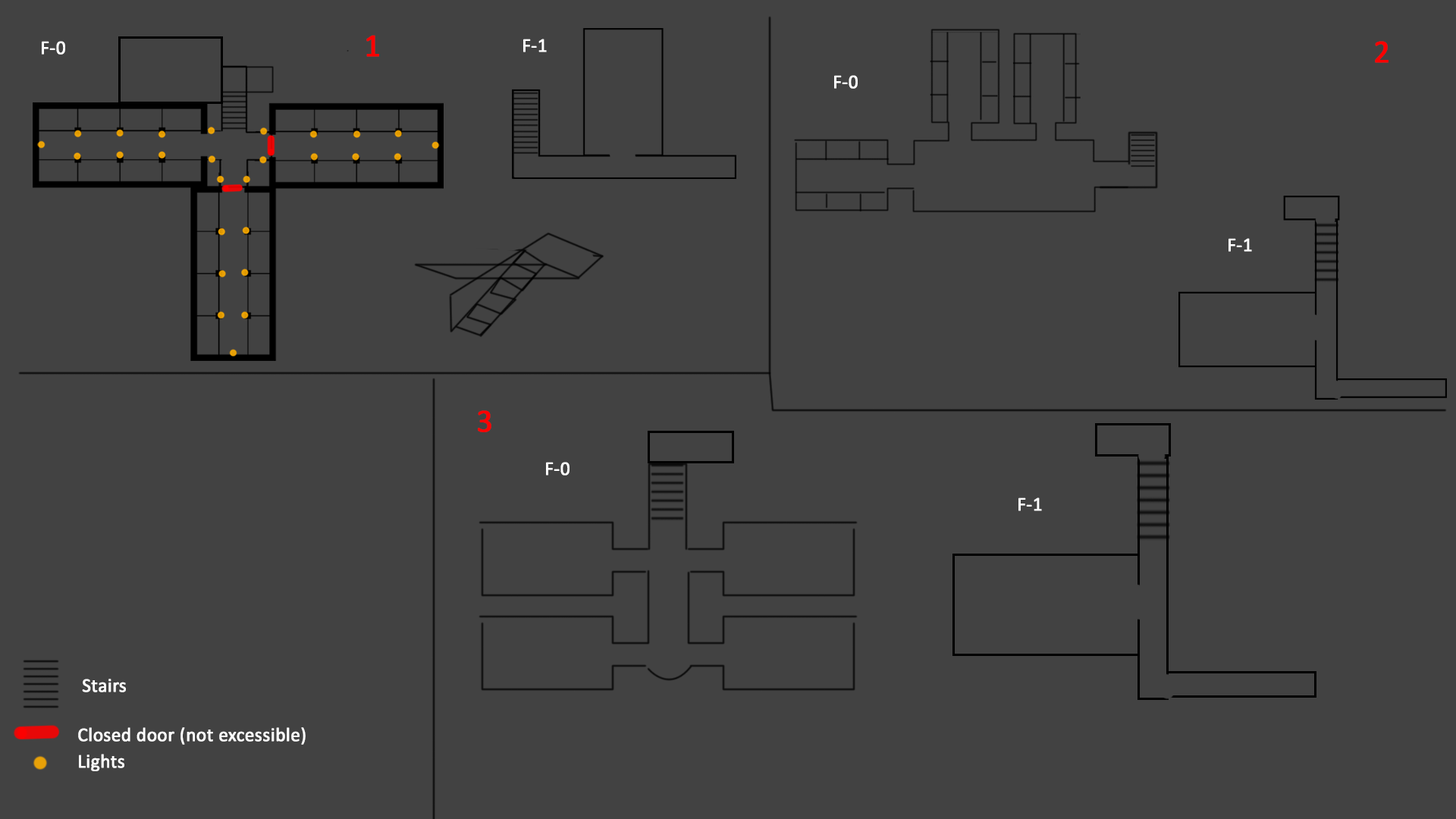
<style>
.page{position:relative;width:1456px;height:819px;background:#424242}
.page>*{position:absolute;margin:0}
.t1{font:19.6px "Calibri";color:#ffffff;font-weight:bold;scale:0.97 1}
.t2{font:32.6px "Calibri";color:#ff0000;font-weight:bold;scale:0.97 1}
</style>
<div class="page">
<p class="t1" style="left:42px;top:41px;width:23px;height:14px">F-0</p>
<p class="t2" style="left:366px;top:35px;width:13px;height:22px">1</p>
<p class="t1" style="left:523px;top:39px;width:24px;height:13px">F-1</p>
<p class="t2" style="left:1375px;top:41px;width:13px;height:22px">2</p>
<p class="t1" style="left:834px;top:75px;width:24px;height:14px">F-0</p>
<p class="t1" style="left:1228px;top:238px;width:24px;height:14px">F-1</p>
<p class="t2" style="left:478px;top:410px;width:13px;height:22px">3</p>
<p class="t1" style="left:546px;top:462px;width:24px;height:13px">F-0</p>
<p class="t1" style="left:1018px;top:497px;width:24px;height:14px">F-1</p>
<p class="t1" style="left:82px;top:679px;width:44px;height:13px">Stairs</p>
<p class="t1" style="left:78px;top:727px;width:228px;height:18px">Closed door (not excessible)</p>
<p class="t1" style="left:79px;top:754px;width:45px;height:17px">Lights</p>
</div>
